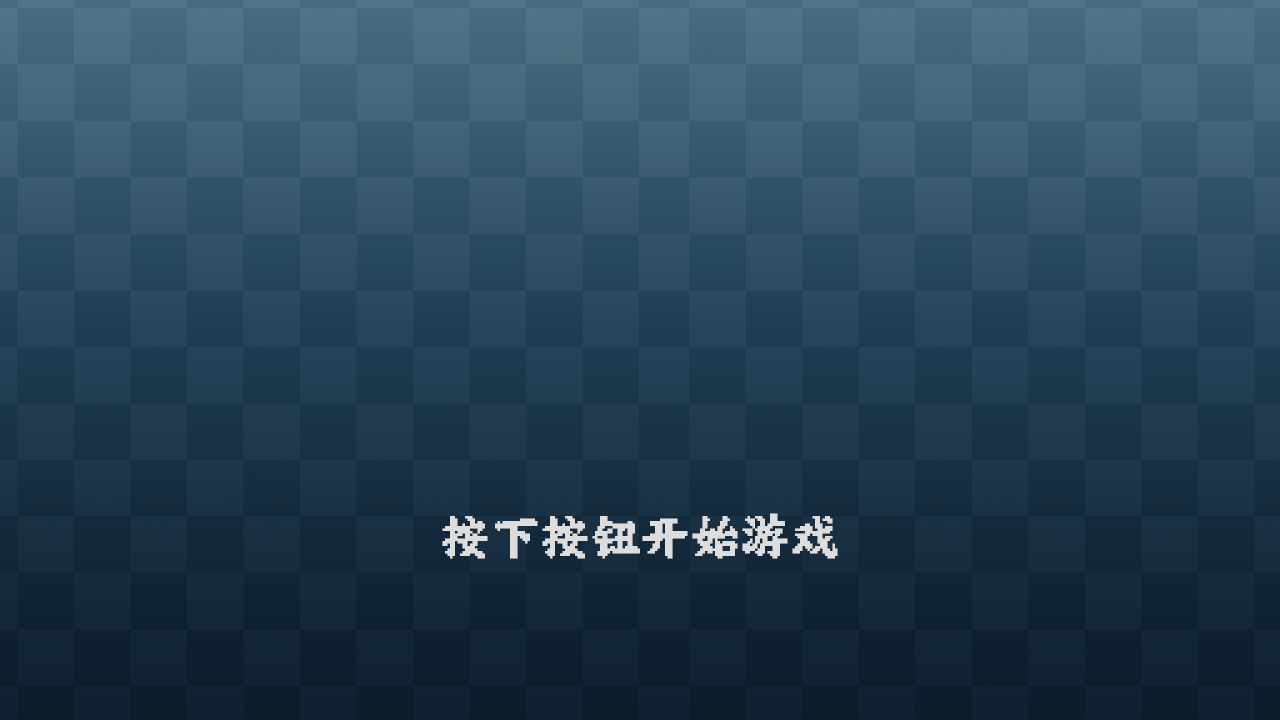
<style>
.page{position:relative;width:1280px;height:720px}
.page>*{position:absolute;margin:0}
.t1{font:50px "AaXiangSuShanHai";color:#dddddd}
</style>
<div class="page">
<p class="t1" style="left:442px;top:513px;width:396px;height:46px">按下按钮开始游戏</p>
</div>
